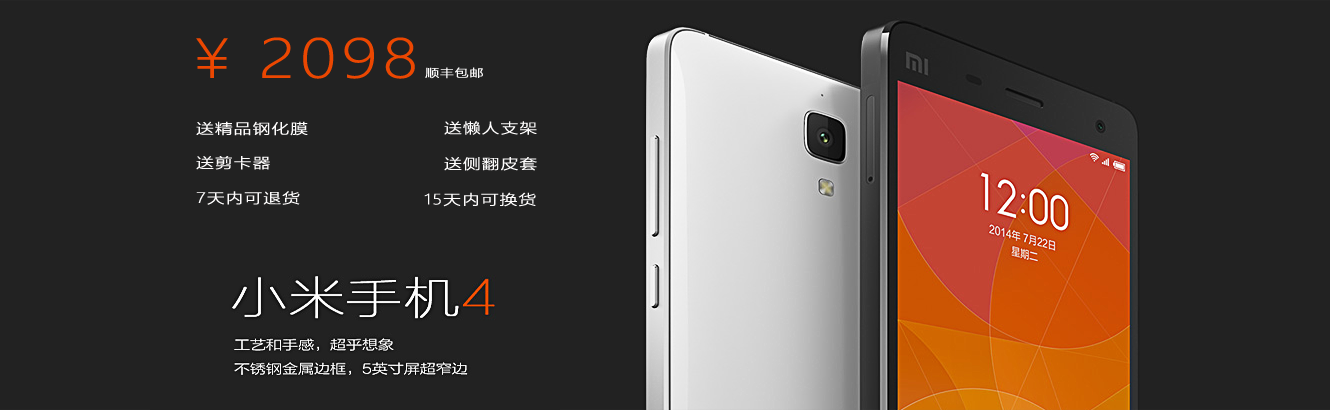
<style>
.page{position:relative;width:1330px;height:410px;background:#222222}
.page>*{position:absolute;margin:0}
.t1{font:52px "MicrosoftYaHeiLight";letter-spacing:0.05em;color:#eb4701;font-weight:bold;scale:1.25 1}
.t2{font:11px "MicrosoftYaHeiLight";letter-spacing:0.05em;color:#fefdfd;font-weight:bold;scale:1.25 1}
.t3{font:14px "MicrosoftYaHeiLight";letter-spacing:0.05em;color:#fefdfd;font-weight:bold;scale:1.25 1}
</style>
<div class="page">
<p class="t1" style="left:196px;top:37px;width:219px;height:42px">¥ 2098</p>
<p class="t2" style="left:425px;top:67px;width:58px;height:12px">顺丰包邮</p>
<p class="t3" style="left:196px;top:121px;width:112px;height:15px">送精品钢化膜</p>
<p class="t3" style="left:444px;top:121px;width:93px;height:14px">送懒人支架</p>
<p class="t3" style="left:196px;top:156px;width:74px;height:14px">送剪卡器</p>
<p class="t3" style="left:444px;top:157px;width:93px;height:14px">送侧翻皮套</p>
<p class="t3" style="left:196px;top:191px;width:104px;height:14px">7天内可退货</p>
<p class="t3" style="left:424px;top:192px;width:112px;height:15px">15天内可换货</p>
</div>
